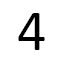
<style>
.page{position:relative;width:64px;height:64px;background:#ffffff}
.page>*{position:absolute;margin:0}
.t1{font:58.3px "Calibri";color:#000000}
</style>
<div class="page">
<p class="t1" style="left:18px;top:13px;width:27px;height:37px">4</p>
</div>
